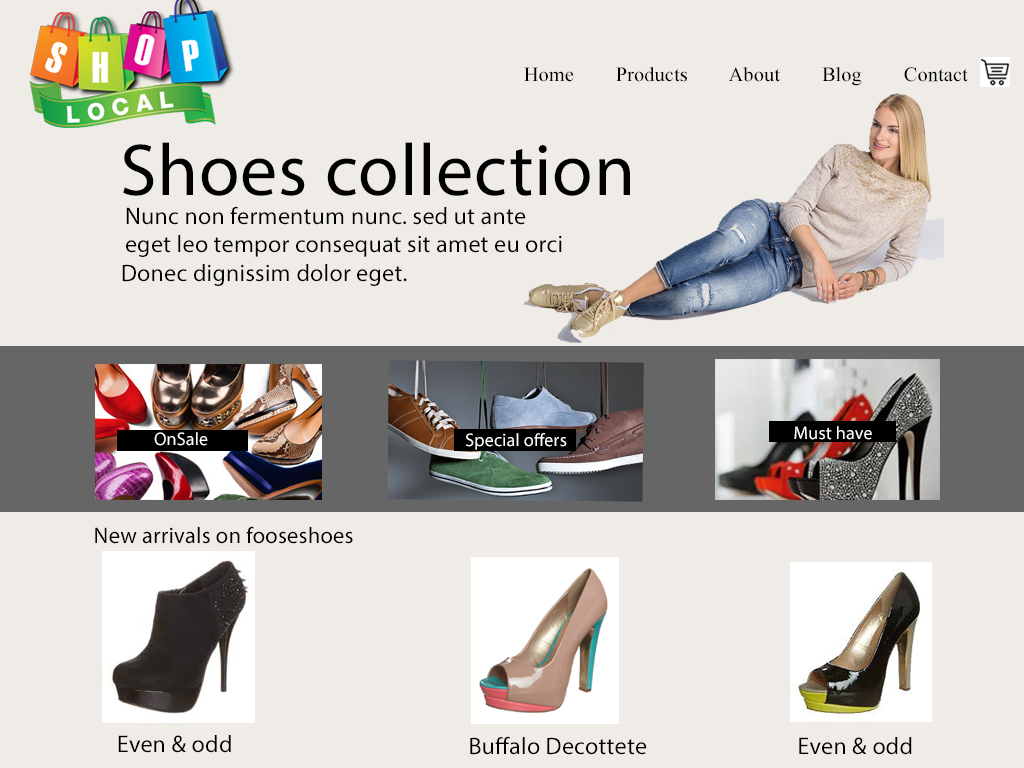
<style>
.page{position:relative;width:1024px;height:768px;background:#efece7}
.page>*{position:absolute;margin:0}
.t1{font:20.1px "MongolianBaiti";letter-spacing:0.01em;color:#000000}
.t2{font:74.1px "MyriadPro-Regular";letter-spacing:0.01em;color:#000000}
.t3{font:24px "MyriadPro-Regular";letter-spacing:0.01em;color:#000000}
.t4{font:18px "MyriadPro-Regular";letter-spacing:0.01em;color:#ffffff}
.t5{font:22.6px "MyriadPro-Regular";letter-spacing:0.01em;color:#000000}
</style>
<div class="page">
<p class="t1" style="left:524px;top:67px;width:444px;height:19px">Home        Products        About        Blog        Contact</p>
<p class="t2" style="left:123px;top:142px;width:507px;height:54px">Shoes collection</p>
<p class="t3" style="left:126px;top:206px;width:400px;height:19px">Nunc non fermentum nunc. sed ut ante</p>
<p class="t3" style="left:126px;top:235px;width:436px;height:22px">eget leo tempor consequat sit amet eu orci</p>
<p class="t3" style="left:122px;top:264px;width:285px;height:22px">Donec dignissim dolor eget.</p>
<p class="t4" style="left:154px;top:432px;width:54px;height:14px">OnSale</p>
<p class="t4" style="left:466px;top:433px;width:101px;height:17px">Special offers</p>
<p class="t4" style="left:794px;top:426px;width:78px;height:14px">Must have</p>
<p class="t5" style="left:95px;top:526px;width:258px;height:18px">New arrivals on fooseshoes</p>
<p class="t3" style="left:118px;top:735px;width:113px;height:18px">Even &amp; odd</p>
<p class="t3" style="left:470px;top:736px;width:177px;height:19px">Buffalo Decottete</p>
<p class="t3" style="left:799px;top:737px;width:113px;height:18px">Even &amp; odd</p>
</div>
